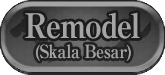
<style>
.page{position:relative;width:165px;height:75px}
.page>*{position:absolute;margin:0}
.t1{font:34px "RyuminPro-ExBold";letter-spacing:-0.04em;color:#a4a4a4;scale:0.9 1}
.t2{font:18px "RyuminPro-ExBold";letter-spacing:-0.04em;color:#a4a4a4;scale:0.9 1}
</style>
<div class="page">
<p class="t1" style="left:25px;top:12px;width:115px;height:27px">Remodel</p>
<p class="t2" style="left:36px;top:44px;width:95px;height:17px"><span class="t1"><br></span>(Skala Besar)</p>
</div>
